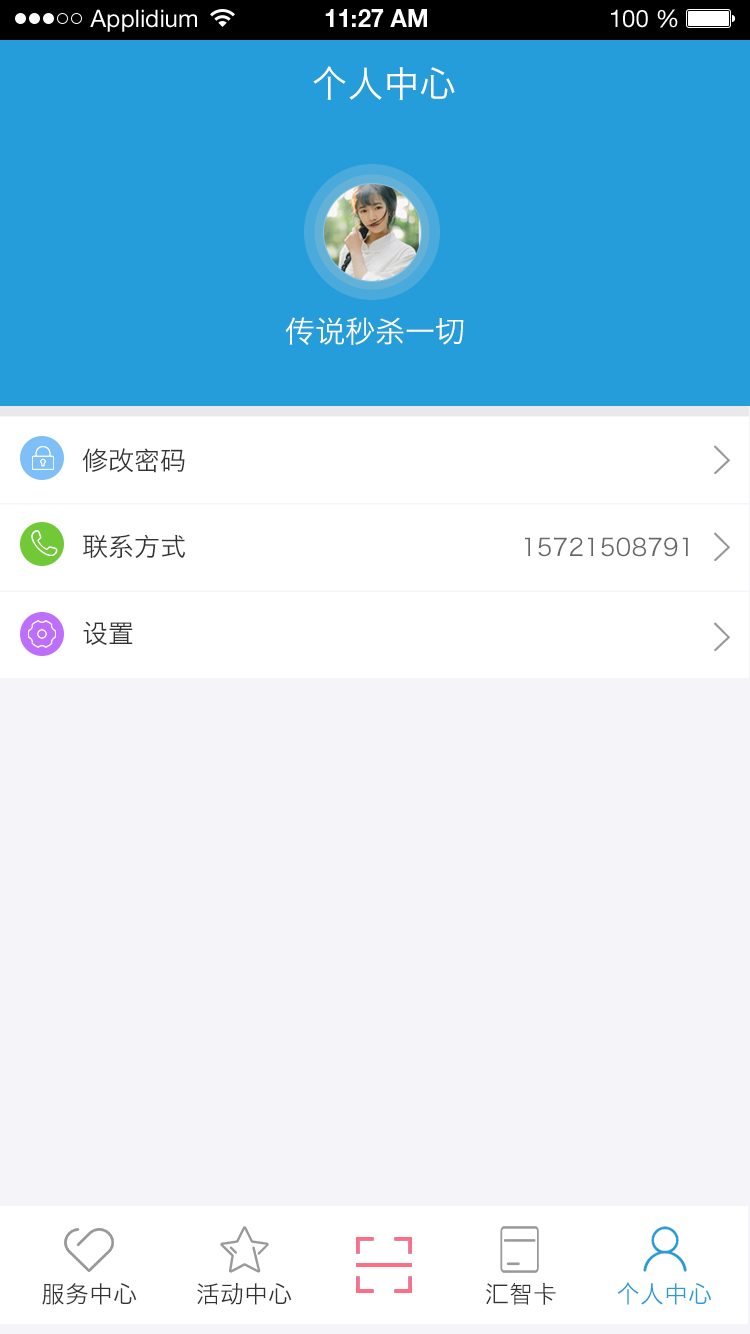
<style>
.page{position:relative;width:750px;height:1334px;background:#f5f4f9}
.page>*{position:absolute;margin:0}
.t1{font:24px "HelveticaNeueLTStd-Roman";color:#ffffff}
.t2{font:24px "HelveticaNeueLTStd-Bd";color:#ffffff}
.t3{font:36px "HiraginoSansGB-W3";color:#ffffff;text-transform:uppercase}
.t4{font:30px "HiraginoSansGB-W3";color:#ffffff;text-transform:uppercase}
.t5{font:26px "HiraginoSansGB-W3";color:#333333;text-transform:uppercase}
.t6{font:24px "HiraginoSansGB-W3";color:#666666;text-transform:uppercase}
.t7{font:24px "HiraginoSansGB-W3";color:#333333;text-transform:uppercase}
.t8{font:24px "HiraginoSansGB-W3";color:#259dda;text-transform:uppercase}
</style>
<div class="page">
<p class="t1" style="left:90px;top:9px;width:107px;height:23px">Applidium</p>
<p class="t2" style="left:325px;top:9px;width:102px;height:18px">11:27 AM</p>
<p class="t1" style="left:611px;top:9px;width:67px;height:19px">100 %</p>
<p class="t3" style="left:313px;top:66px;width:142px;height:34px">个人中心</p>
<p class="t4" style="left:285px;top:317px;width:179px;height:28px">传说秒杀一切</p>
<p class="t5" style="left:82px;top:448px;width:103px;height:25px">修改密码</p>
<p class="t5" style="left:83px;top:534px;width:102px;height:24px">联系方式</p>
<p class="t6" style="left:524px;top:537px;width:164px;height:20px">15721508791</p>
<p class="t5" style="left:83px;top:621px;width:50px;height:24px">设置</p>
<p class="t7" style="left:42px;top:1283px;width:95px;height:22px">服务中心</p>
<p class="t7" style="left:197px;top:1283px;width:95px;height:22px">活动中心</p>
<p class="t7" style="left:486px;top:1282px;width:70px;height:23px">汇智卡</p>
<p class="t8" style="left:617px;top:1282px;width:95px;height:23px">个人中心</p>
</div>
